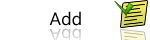
<style>
.page{position:relative;width:150px;height:40px;background:#ffffff}
.page>*{position:absolute;margin:0}
.t1{font:18px "SegoeUI";color:#000000}
</style>
<div class="page">
<p class="t1" style="left:49px;top:11px;width:32px;height:15px">Add</p>
</div>
